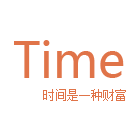
<style>
.page{position:relative;width:140px;height:140px;background:#ffffff}
.page>*{position:absolute;margin:0}
.t1{font:48px "MicrosoftYaHei";color:#e07449}
.t2{font:12px "NSimSun";color:#e07449}
</style>
<div class="page">
<p class="t1" style="left:14px;top:40px;width:110px;height:38px">Time</p>
<p class="t2" style="left:43px;top:89px;width:83px;height:12px">时间是一种财富</p>
</div>
